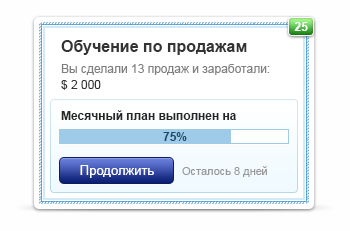
<style>
.page{position:relative;width:350px;height:231px;background:#fefefe}
.page>*{position:absolute;margin:0}
.t1{font:12px "Arial-BoldMT";color:#ffffff}
.t2{font:12px/16px "ArialMT";color:#808080}
.t3{font:16px/16px "Arial-BoldMT";color:#333333}
.t4{font:12px/16px "ArialMT";color:#333333}
.t5{font:12px "Arial-BoldMT";color:#262626}
.t6{font:12px "Arial-BoldMT";color:#1e4b69}
.t7{font:13px "ArialMT";color:#ffffff}
.t8{font:11px "ArialMT";color:#999999}
</style>
<div class="page">
<p class="t1" style="left:294px;top:22px;width:14px;height:9px">25</p>
<p class="t2" style="left:61px;top:40px;width:209px;height:50px"><span class="t3">Обучение по продажам<br></span>Вы сделали 13 продаж и заработали:<br><span class="t4">$ 2 000</span></p>
<p class="t5" style="left:61px;top:110px;width:175px;height:10px">Месячный план выполнен на</p>
<p class="t6" style="left:163px;top:132px;width:24px;height:9px">75%</p>
<p class="t7" style="left:80px;top:165px;width:74px;height:13px">Продолжить</p>
<p class="t8" style="left:182px;top:166px;width:85px;height:11px">Осталось 8 дней</p>
</div>
